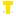
<style>
.page{position:relative;width:16px;height:16px;background:#ffffff}
.page>*{position:absolute;margin:0}
.t1{font:17px "ShowcardGothic-Reg";color:#fbe105}
</style>
<div class="page">
<p class="t1" style="left:2px;top:1px;width:12px;height:13px">T</p>
</div>
